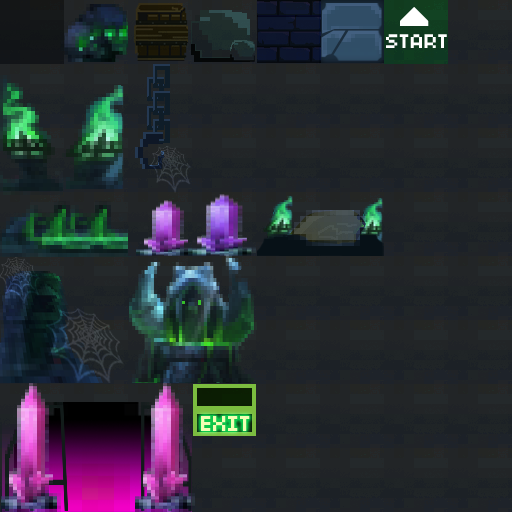
<style>
.page{position:relative;width:512px;height:512px}
.page>*{position:absolute;margin:0}
.t1{font:22px "04b03";color:#ffffff}
.t2{font:24px "04b03";color:#f0ffb4}
</style>
<div class="page">
<p class="t1" style="left:386px;top:34px;width:61px;height:14px">START</p>
<p class="t2" style="left:201px;top:416px;width:49px;height:15px">EXIT</p>
</div>
